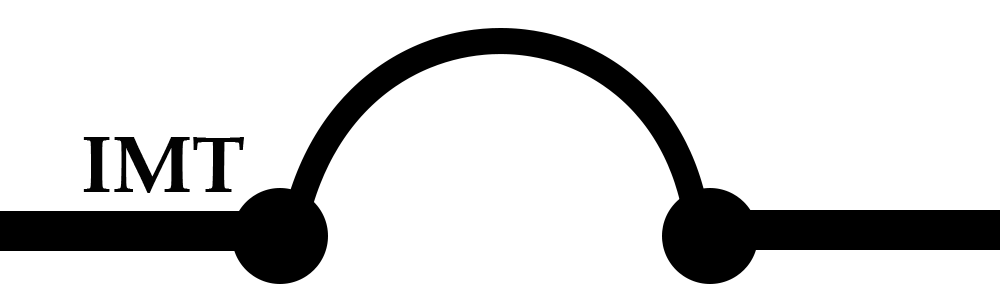
<style>
.page{position:relative;width:1000px;height:300px;background:#ffffff}
.page>*{position:absolute;margin:0}
.t1{font:80px "BookAntiqua-Bold";color:#020202}
</style>
<div class="page">
<p class="t1" style="left:83px;top:137px;width:161px;height:56px">IMT</p>
</div>
